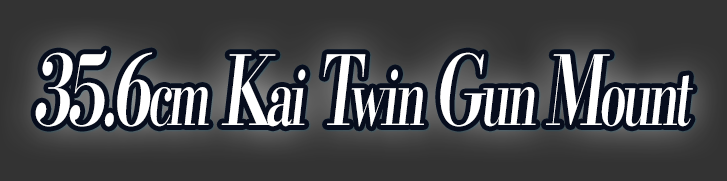
<style>
.page{position:relative;width:727px;height:181px;background:#333333}
.page>*{position:absolute;margin:0}
.t1{font:96px "KochoStd-Heavy";letter-spacing:-0.08em;color:#ffffff;font-style:italic;scale:0.64 1}
.t2{font:76.8px "KochoStd-Heavy";letter-spacing:-0.08em;color:#ffffff;font-style:italic;scale:0.64 1}
</style>
<div class="page">
<p class="t1" style="left:35px;top:50px;width:658px;height:77px">35.6<span class="t2">cm</span> K<span class="t2">ai</span> T<span class="t2">win </span>G<span class="t2">un </span>M<span class="t2">ount</span></p>
</div>
